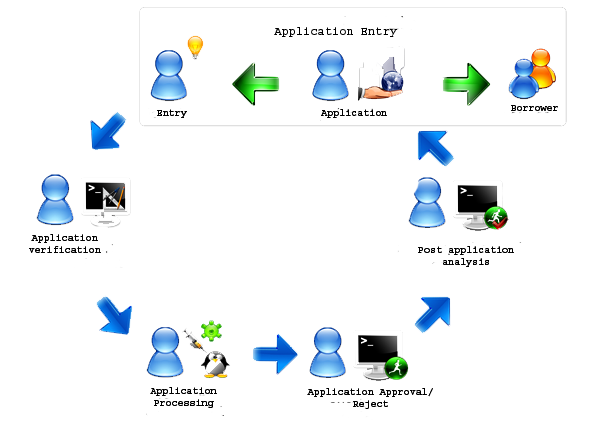
<style>
.page{position:relative;width:600px;height:432px;background:#ffffff}
.page>*{position:absolute;margin:0}
.t1{font:12px "Courier-Bold";color:#000000}
.t2{font:10px "Courier-Bold";color:#000000}
</style>
<div class="page">
<p class="t1" style="left:274px;top:27px;width:123px;height:10px">Application Entry</p>
<p class="t2" style="left:157px;top:109px;width:30px;height:9px">Entry</p>
<p class="t2" style="left:29px;top:234px;width:72px;height:19px;text-align:center">Application verification</p>
<p class="t2" style="left:418px;top:246px;width:96px;height:21px;text-align:center">Post application analysis</p>
<p class="t2" style="left:150px;top:387px;width:67px;height:21px;text-align:center">Application Processing</p>
<p class="t2" style="left:307px;top:388px;width:126px;height:21px;text-align:center">Application Approval/ Reject</p>
</div>
